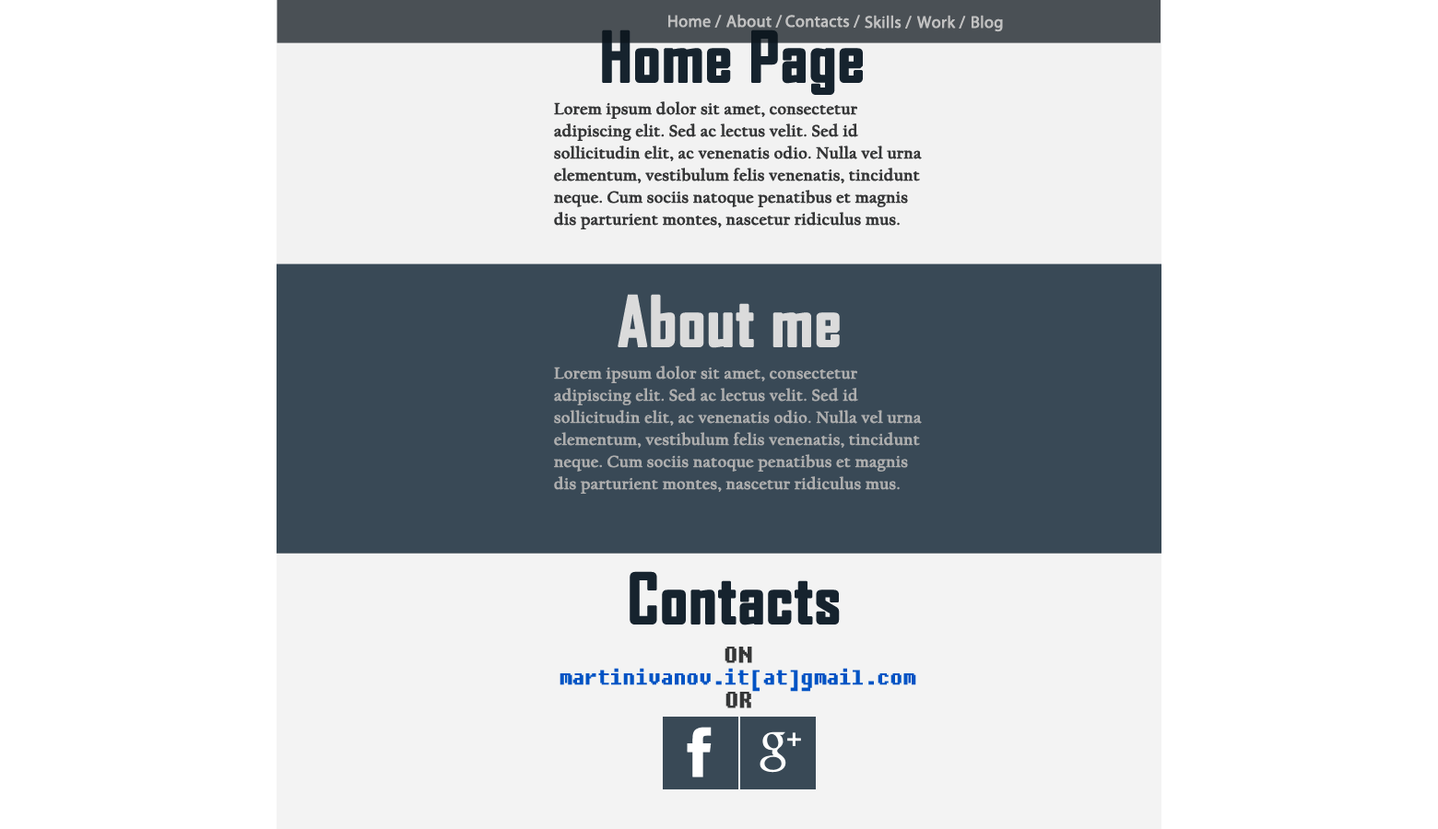
<style>
.page{position:relative;width:1438px;height:829px;background:#ffffff}
.page>*{position:absolute;margin:0}
.t1{font:16.6px "MyriadPro-Regular";color:#c1c1c1;font-weight:bold}
.t2{font:66.4px "AgencyFB-Bold";color:#16232e;font-weight:bold}
.t3{font:16.6px/22.1px "CalifornianFB-Bold";color:#353637;font-weight:bold}
.t4{font:66.4px "AgencyFB-Bold";color:#dbdbdb;font-weight:bold}
.t5{font:16.6px/22.1px "CalifornianFB-Bold";color:#aeaeae;font-weight:bold}
.t6{font:22.1px "Fixedsys";color:#353637;font-weight:bold}
.t7{font:20.3px "Fixedsys";color:#0053c4;font-weight:bold}
.t8{font:22.1px "CalifornianFB-Bold";color:#0053c4;font-weight:bold}
</style>
<div class="page">
<p class="t1" style="left:668px;top:15px;width:54px;height:13px">Home /</p>
<p class="t1" style="left:726px;top:14px;width:56px;height:14px">About /</p>
<p class="t1" style="left:785px;top:15px;width:75px;height:13px">Contacts /</p>
<p class="t1" style="left:864px;top:15px;width:47px;height:14px">Skills /</p>
<p class="t1" style="left:917px;top:15px;width:49px;height:14px">Work /</p>
<p class="t1" style="left:971px;top:15px;width:32px;height:17px">Blog</p>
<p class="t2" style="left:602px;top:29px;width:261px;height:66px">Home Page</p>
<p class="t3" style="left:554px;top:101px;width:368px;height:128px">Lorem ipsum dolor sit amet, consectetur adipiscing elit. Sed ac lectus velit. Sed id sollicitudin elit, ac venenatis odio. Nulla vel urna elementum, vestibulum felis venenatis, tincidunt neque. Cum sociis natoque penatibus et magnis dis parturient montes, nascetur ridiculus mus.</p>
<p class="t4" style="left:617px;top:294px;width:223px;height:54px">About me</p>
<p class="t5" style="left:554px;top:366px;width:368px;height:128px">Lorem ipsum dolor sit amet, consectetur adipiscing elit. Sed ac lectus velit. Sed id sollicitudin elit, ac venenatis odio. Nulla vel urna elementum, vestibulum felis venenatis, tincidunt neque. Cum sociis natoque penatibus et magnis dis parturient montes, nascetur ridiculus mus.</p>
<p class="t2" style="left:629px;top:571px;width:211px;height:55px">Contacts</p>
<p class="t6" style="left:724px;top:647px;width:28px;height:17px">ON</p>
<p class="t7" style="left:559px;top:668px;width:357px;height:24px">martinivanov.it[at]gmail.com</p>
<p class="t6" style="left:725px;top:692px;width:26px;height:17px"><span class="t8"><br>      </span>OR</p>
</div>
